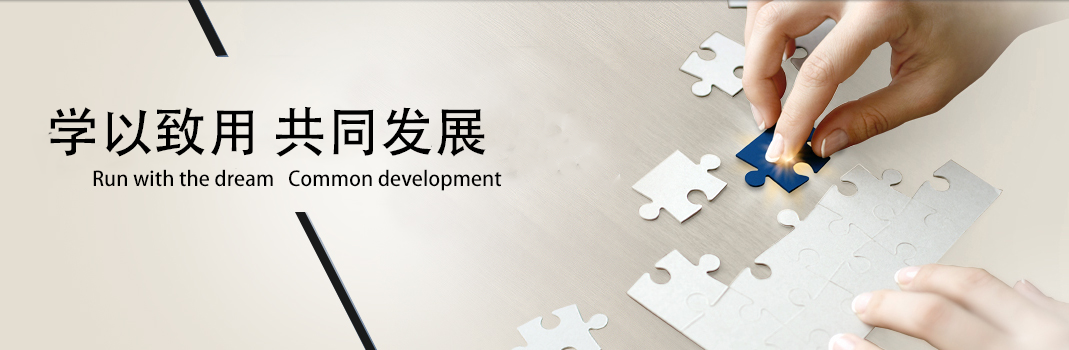
<style>
.page{position:relative;width:1069px;height:350px}
.page>*{position:absolute;margin:0}
.t1{font:53.7px "AdobeHeitiStd-Regular";color:#000000}
.t2{font:20.3px "AdobeHeitiStd-Regular";color:#000000}
</style>
<div class="page">
<p class="t1" style="left:50px;top:106px;width:436px;height:51px">学以致用 共同发展</p>
<p class="t2" style="left:93px;top:169px;width:409px;height:22px">Run with the dream   Common development</p>
</div>
